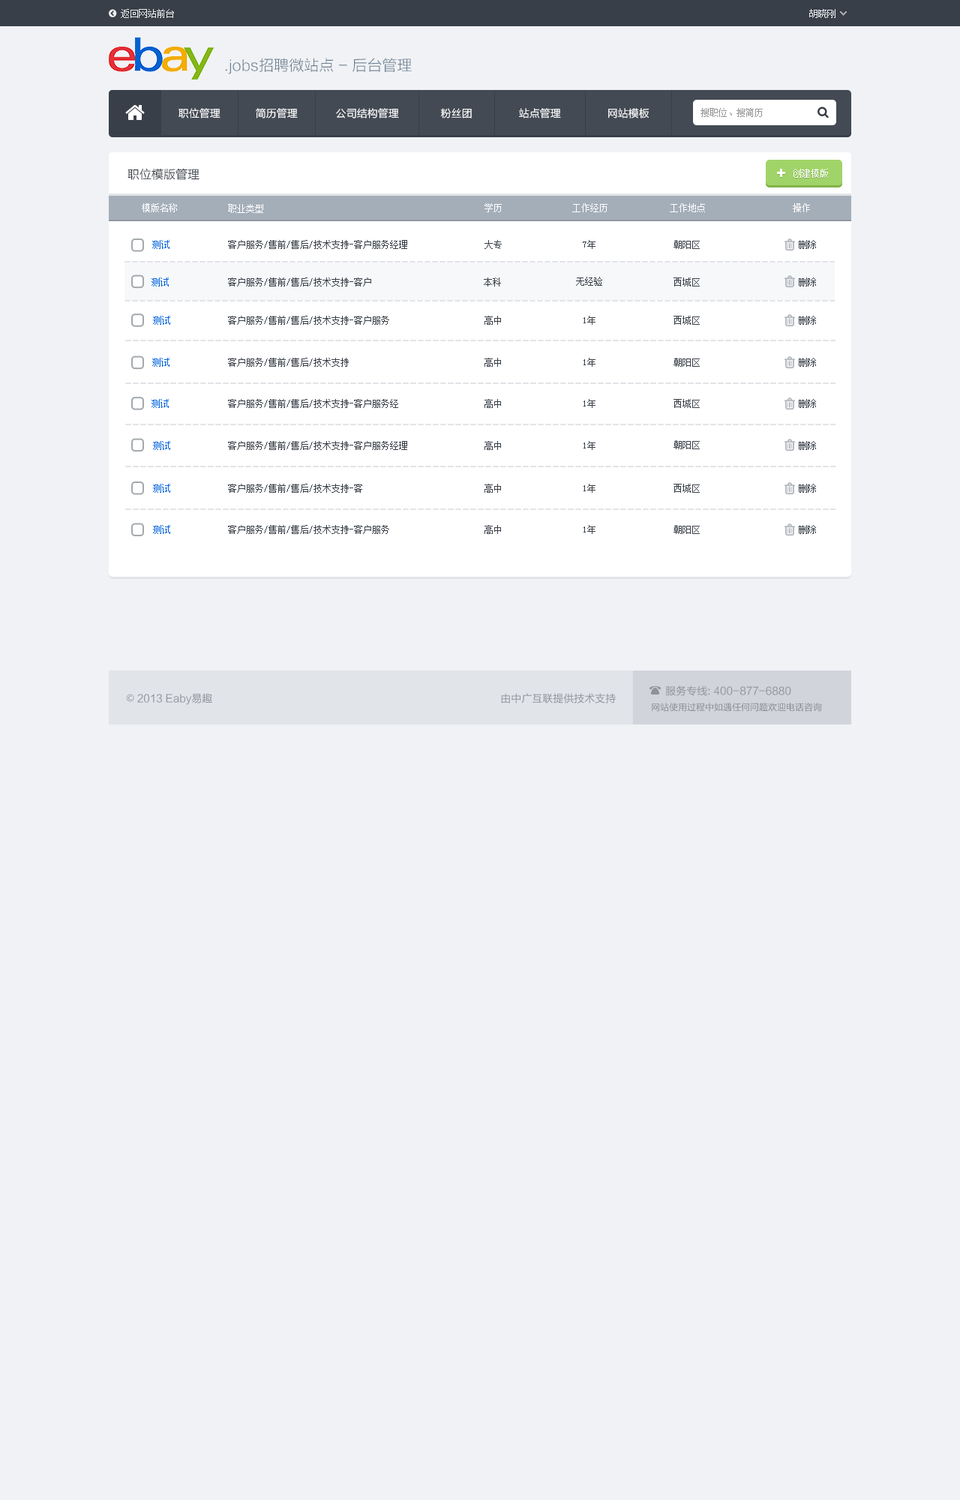
<style>
.page{position:relative;width:960px;height:1500px;background:#f0f2f5}
.page>*{position:absolute;margin:0}
.t1{font:9px "SimSun";color:#eceef0}
.t2{font:15px "FZLTXHK";color:#6c8092}
.t3{font:10.5px "FZLTXHK";color:#ffffff}
.t4{font:9px "SimSun";color:#959596}
.t5{font:12px "FZLTXHK";color:#393f48}
.t6{font:9px "SimSun";color:#ffffff}
.t7{font:9px "SimSun";color:#0063dc}
.t8{font:9px "SimSun";color:#393f48}
.t9{font:10.5px "FZLTHK--GBK1-0";color:#8f9399}
.t10{font:10.5px "AdobeHeitiStd-Regular";color:#8f9399}
.t11{font:9px "FZLTHJW--GB1-0";color:#868990}
</style>
<div class="page">
<p class="t1" style="left:121px;top:9px;width:53px;height:9px">返回网站前台</p>
<p class="t1" style="left:809px;top:9px;width:27px;height:9px">胡晓刚</p>
<p class="t2" style="left:225px;top:58px;width:187px;height:16px">.jobs招聘微站点 - 后台管理</p>
<p class="t3" style="left:178px;top:108px;width:42px;height:10px">职位管理</p>
<p class="t3" style="left:256px;top:108px;width:42px;height:10px">简历管理</p>
<p class="t3" style="left:336px;top:108px;width:63px;height:10px">公司结构管理</p>
<p class="t3" style="left:441px;top:108px;width:31px;height:10px">粉丝团</p>
<p class="t3" style="left:519px;top:108px;width:42px;height:10px">站点管理</p>
<p class="t3" style="left:608px;top:108px;width:41px;height:10px">网站模板</p>
<p class="t4" style="left:700px;top:108px;width:63px;height:9px">搜职位、搜简历</p>
<p class="t5" style="left:128px;top:168px;width:72px;height:12px">职位模版管理</p>
<p class="t6" style="left:793px;top:169px;width:35px;height:9px">创建模版</p>
<p class="t6" style="left:142px;top:203px;width:35px;height:9px">模版名称</p>
<p class="t6" style="left:228px;top:204px;width:35px;height:9px">职业类型</p>
<p class="t6" style="left:484px;top:203px;width:18px;height:9px">学历</p>
<p class="t6" style="left:572px;top:203px;width:36px;height:9px">工作经历</p>
<p class="t6" style="left:670px;top:203px;width:35px;height:9px">工作地点</p>
<p class="t6" style="left:793px;top:203px;width:17px;height:9px">操作</p>
<p class="t7" style="left:152px;top:240px;width:18px;height:9px">测试</p>
<p class="t8" style="left:228px;top:240px;width:179px;height:9px">客户服务/售前/售后/技术支持-客户服务经理</p>
<p class="t8" style="left:484px;top:240px;width:18px;height:9px">大专</p>
<p class="t8" style="left:583px;top:240px;width:13px;height:9px">7年</p>
<p class="t8" style="left:674px;top:240px;width:26px;height:9px">朝阳区</p>
<p class="t8" style="left:799px;top:240px;width:17px;height:9px">删除</p>
<p class="t7" style="left:152px;top:278px;width:17px;height:8px">测试</p>
<p class="t8" style="left:228px;top:278px;width:143px;height:8px">客户服务/售前/售后/技术支持-客户</p>
<p class="t8" style="left:484px;top:278px;width:17px;height:8px">本科</p>
<p class="t8" style="left:576px;top:277px;width:26px;height:9px">无经验</p>
<p class="t8" style="left:674px;top:278px;width:26px;height:8px">西城区</p>
<p class="t8" style="left:799px;top:278px;width:17px;height:8px">删除</p>
<p class="t7" style="left:153px;top:316px;width:17px;height:9px">测试</p>
<p class="t8" style="left:228px;top:316px;width:161px;height:9px">客户服务/售前/售后/技术支持-客户服务</p>
<p class="t8" style="left:484px;top:316px;width:17px;height:9px">高中</p>
<p class="t8" style="left:584px;top:316px;width:12px;height:9px">1年</p>
<p class="t8" style="left:674px;top:316px;width:26px;height:9px">西城区</p>
<p class="t8" style="left:799px;top:316px;width:17px;height:9px">删除</p>
<p class="t7" style="left:152px;top:358px;width:18px;height:9px">测试</p>
<p class="t8" style="left:228px;top:358px;width:121px;height:9px">客户服务/售前/售后/技术支持</p>
<p class="t8" style="left:484px;top:358px;width:17px;height:9px">高中</p>
<p class="t8" style="left:584px;top:358px;width:12px;height:9px">1年</p>
<p class="t8" style="left:674px;top:358px;width:26px;height:9px">朝阳区</p>
<p class="t8" style="left:799px;top:358px;width:17px;height:9px">删除</p>
<p class="t7" style="left:152px;top:399px;width:17px;height:9px">测试</p>
<p class="t8" style="left:228px;top:399px;width:170px;height:9px">客户服务/售前/售后/技术支持-客户服务经</p>
<p class="t8" style="left:484px;top:399px;width:17px;height:9px">高中</p>
<p class="t8" style="left:584px;top:399px;width:12px;height:9px">1年</p>
<p class="t8" style="left:674px;top:399px;width:26px;height:9px">西城区</p>
<p class="t8" style="left:799px;top:399px;width:17px;height:9px">删除</p>
<p class="t7" style="left:153px;top:441px;width:17px;height:9px">测试</p>
<p class="t8" style="left:228px;top:441px;width:179px;height:9px">客户服务/售前/售后/技术支持-客户服务经理</p>
<p class="t8" style="left:484px;top:441px;width:17px;height:9px">高中</p>
<p class="t8" style="left:584px;top:441px;width:12px;height:9px">1年</p>
<p class="t8" style="left:674px;top:440px;width:26px;height:9px">朝阳区</p>
<p class="t8" style="left:799px;top:441px;width:17px;height:9px">删除</p>
<p class="t7" style="left:153px;top:484px;width:17px;height:9px">测试</p>
<p class="t8" style="left:228px;top:484px;width:134px;height:9px">客户服务/售前/售后/技术支持-客</p>
<p class="t8" style="left:484px;top:484px;width:17px;height:9px">高中</p>
<p class="t8" style="left:584px;top:484px;width:12px;height:9px">1年</p>
<p class="t8" style="left:674px;top:484px;width:26px;height:9px">西城区</p>
<p class="t8" style="left:799px;top:484px;width:17px;height:9px">删除</p>
<p class="t7" style="left:153px;top:525px;width:17px;height:9px">测试</p>
<p class="t8" style="left:228px;top:525px;width:161px;height:9px">客户服务/售前/售后/技术支持-客户服务</p>
<p class="t8" style="left:484px;top:525px;width:17px;height:9px">高中</p>
<p class="t8" style="left:584px;top:525px;width:12px;height:9px">1年</p>
<p class="t8" style="left:674px;top:525px;width:26px;height:9px">朝阳区</p>
<p class="t8" style="left:799px;top:525px;width:17px;height:9px">删除</p>
<p class="t9" style="left:665px;top:686px;width:126px;height:10px">服务专线: 400-877-6880</p>
<p class="t9" style="left:126px;top:693px;width:86px;height:12px"><span class="t10">©</span> 2013 Eaby易趣</p>
<p class="t9" style="left:501px;top:693px;width:115px;height:11px">由中广互联提供技术支持</p>
<p class="t11" style="left:652px;top:703px;width:170px;height:9px">网站使用过程中如遇任何问题欢迎电话咨询</p>
</div>
